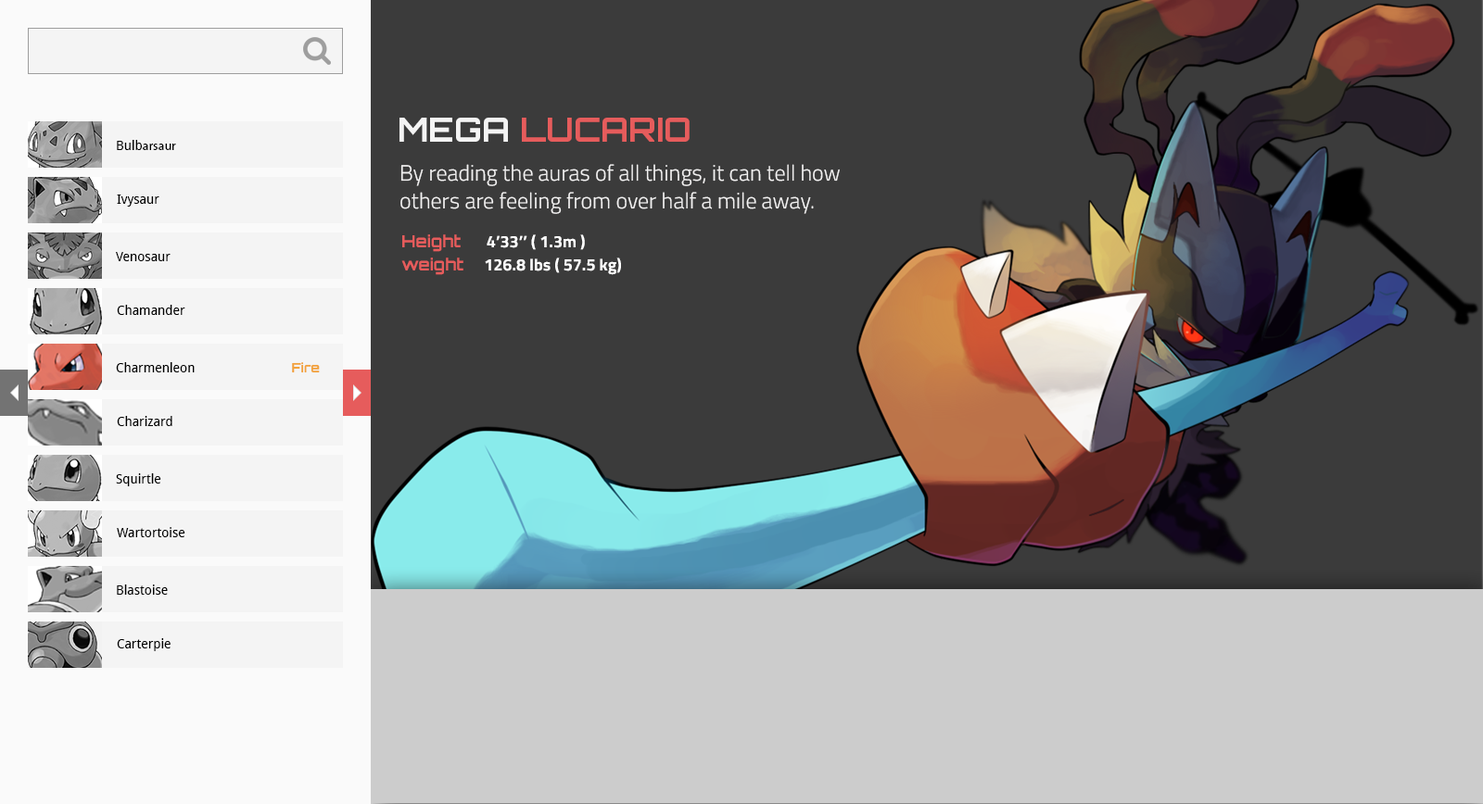
<style>
.page{position:relative;width:1483px;height:804px;background:#3b3b3b}
.page>*{position:absolute;margin:0}
.t1{font:33.4px "Orbitron-Bold";color:#e65c5c;text-transform:uppercase}
.t2{font:33.4px "Orbitron-Bold";color:#f4f4f4;text-transform:uppercase}
.t3{font:13px "MyriadPro-Regular";color:#000000}
.t4{font:13px "DroidSans";color:#000000}
.t5{font:22.2px/27.8px "TitilliumWeb-Light";color:#f3f2f2}
.t6{font:16.7px/23.2px "TitilliumWeb-Bold";color:#ffffff}
.t7{font:16.7px/23.2px "Orbitron-Bold";color:#e65c5c}
.t8{font:13px "Orbitron-Bold";color:#f2a139}
</style>
<div class="page">
<p class="t1" style="left:399px;top:118px;width:290px;height:24px"><span class="t2">Mega </span>Lucario</p>
<p class="t3" style="left:117px;top:140px;width:59px;height:10px"><span class="t4">Bulb</span>arsaur</p>
<p class="t5" style="left:400px;top:164px;width:440px;height:50px">By reading the auras of all things, it can tell how others are feeling from over half a mile away.</p>
<p class="t4" style="left:117px;top:195px;width:42px;height:12px">Ivysaur</p>
<p class="t6" style="left:401px;top:234px;width:220px;height:41px"><span class="t7">Height     </span>4’33’’ ( 1.3m )<br><span class="t7">weight    </span>126.8 lbs ( 57.5 kg)</p>
<p class="t4" style="left:116px;top:252px;width:54px;height:9px">Venosaur</p>
<p class="t4" style="left:117px;top:305px;width:68px;height:10px">Chamander</p>
<p class="t4" style="left:116px;top:362px;width:79px;height:10px">Charmenleon</p>
<p class="t8" style="left:292px;top:362px;width:28px;height:11px">Fire</p>
<p class="t4" style="left:117px;top:416px;width:55px;height:10px">Charizard</p>
<p class="t4" style="left:116px;top:473px;width:45px;height:13px">Squirtle</p>
<p class="t4" style="left:117px;top:527px;width:68px;height:10px">Wartortoise</p>
<p class="t4" style="left:117px;top:585px;width:51px;height:10px">Blastoise</p>
<p class="t4" style="left:117px;top:638px;width:53px;height:13px">Carterpie</p>
</div>
